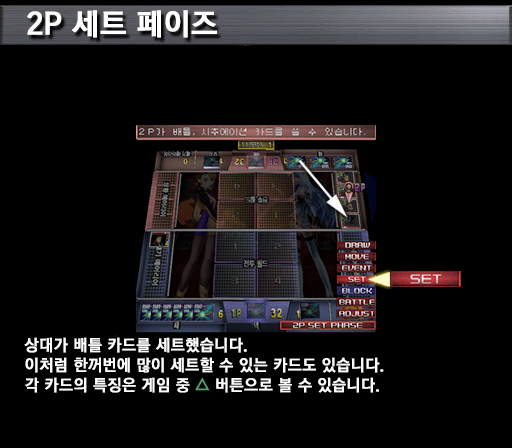
<style>
.page{position:relative;width:512px;height:448px;background:#000000}
.page>*{position:absolute;margin:0}
.t1{font:30px "KoreanGD15-R";color:#ffffff;font-weight:bold}
.t2{font:16px/20px "KoreanGD15-R";color:#ffffff;font-weight:bold}
</style>
<div class="page">
<p class="t1" style="left:27px;top:10px;width:190px;height:28px">2P 세트 페이즈</p>
<p class="t2" style="left:24px;top:337px;width:360px;height:56px">상대가 배틀 카드를 세트했습니다.<br>이처럼 한꺼번에 많이 세트할 수 있는 카드도 있습니다.<br>각 카드의 특징은 게임 중 △ 버튼으로 볼 수 있습니다.</p>
</div>
